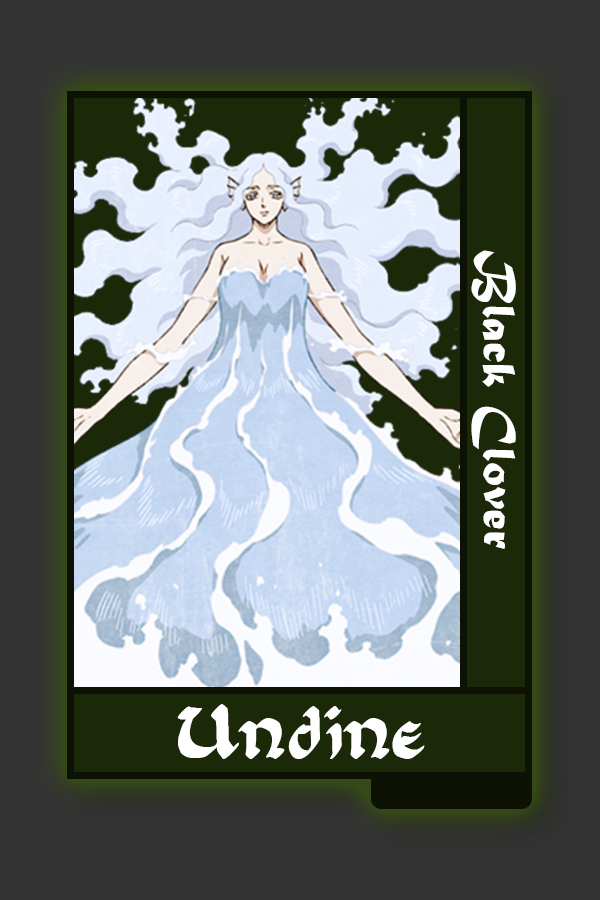
<style>
.page{position:relative;width:600px;height:900px;background:#333333}
.page>*{position:absolute;margin:0}
.t1{font:48.8px "MaturaMTScriptCapitals";color:#ffffff}
.t2{font:64.6px "FloranteatLaura";color:#ffffff}
</style>
<div class="page">
<p class="t1" style="left:471px;top:250px;width:45px;height:299px;rotate:90deg">Black Clover</p>
<p class="t2" style="left:177px;top:704px;width:248px;height:55px">Undine</p>
</div>
